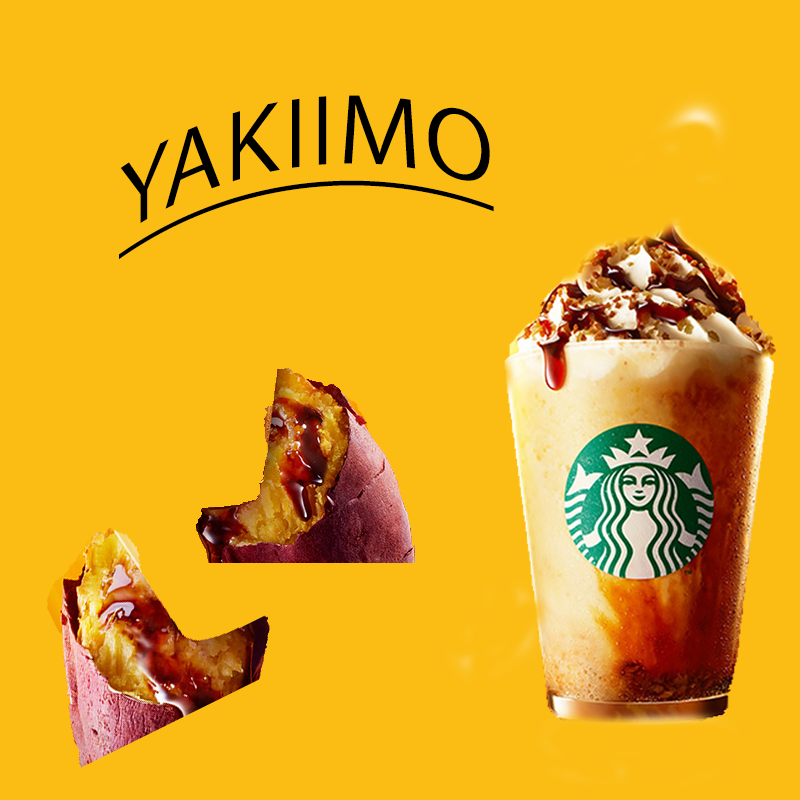
<style>
.page{position:relative;width:800px;height:800px;background:#fbbd14}
.page>*{position:absolute;margin:0}
.t1{font:89.4px "KozGoPr6N-Regular";letter-spacing:0.06em;color:#000000;text-decoration:underline}
</style>
<div class="page">
<p class="t1" style="left:119px;top:95px;width:375px;height:165px">YAKIIMO</p>
</div>
